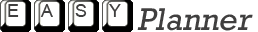
<style>
.page{position:relative;width:258px;height:32px;background:#ffffff}
.page>*{position:absolute;margin:0}
.t1{font:18px "ArialMT";color:#403f3f}
.t2{font:32px "Rockwell";color:#403f3f;font-style:italic}
</style>
<div class="page">
<p class="t1" style="left:8px;top:4px;width:11px;height:13px">E</p>
<p class="t1" style="left:40px;top:4px;width:13px;height:13px">A</p>
<p class="t1" style="left:75px;top:4px;width:12px;height:13px">S</p>
<p class="t1" style="left:109px;top:4px;width:12px;height:13px">Y</p>
<p class="t2" style="left:137px;top:8px;width:116px;height:23px">Planner</p>
</div>
